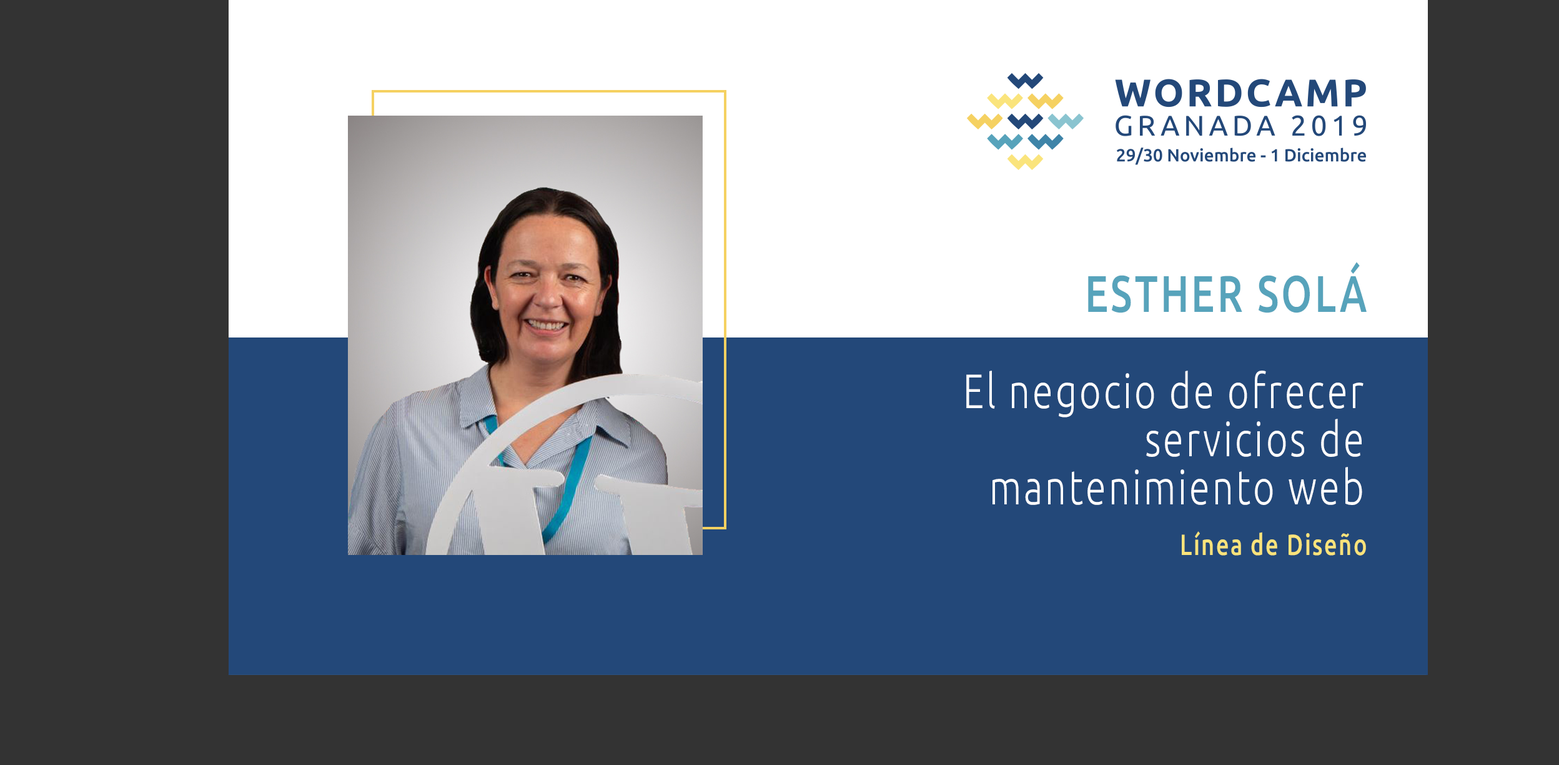
<style>
.page{position:relative;width:1559px;height:765px;background:#333333}
.page>*{position:absolute;margin:0}
.t1{font:51.4px "Ubuntu-Medium";letter-spacing:0.068em;color:#57a3bb;scale:0.77 1}
.t2{font:48.2px/48.2px "Ubuntu-Light";letter-spacing:0.068em;color:#ffffff;scale:0.77 1}
.t3{font:29.2px "Ubuntu-Medium";letter-spacing:0.068em;color:#f9e37b;scale:0.77 1}
</style>
<div class="page">
<p class="t1" style="left:1088px;top:262px;width:279px;height:51px">ESTHER SOLÁ</p>
<p class="t2" style="left:966px;top:370px;width:398px;height:135px;text-align:right">El negocio de ofrecer servicios de mantenimiento web</p>
<p class="t3" style="left:1182px;top:531px;width:184px;height:24px">Línea de Diseño</p>
</div>
